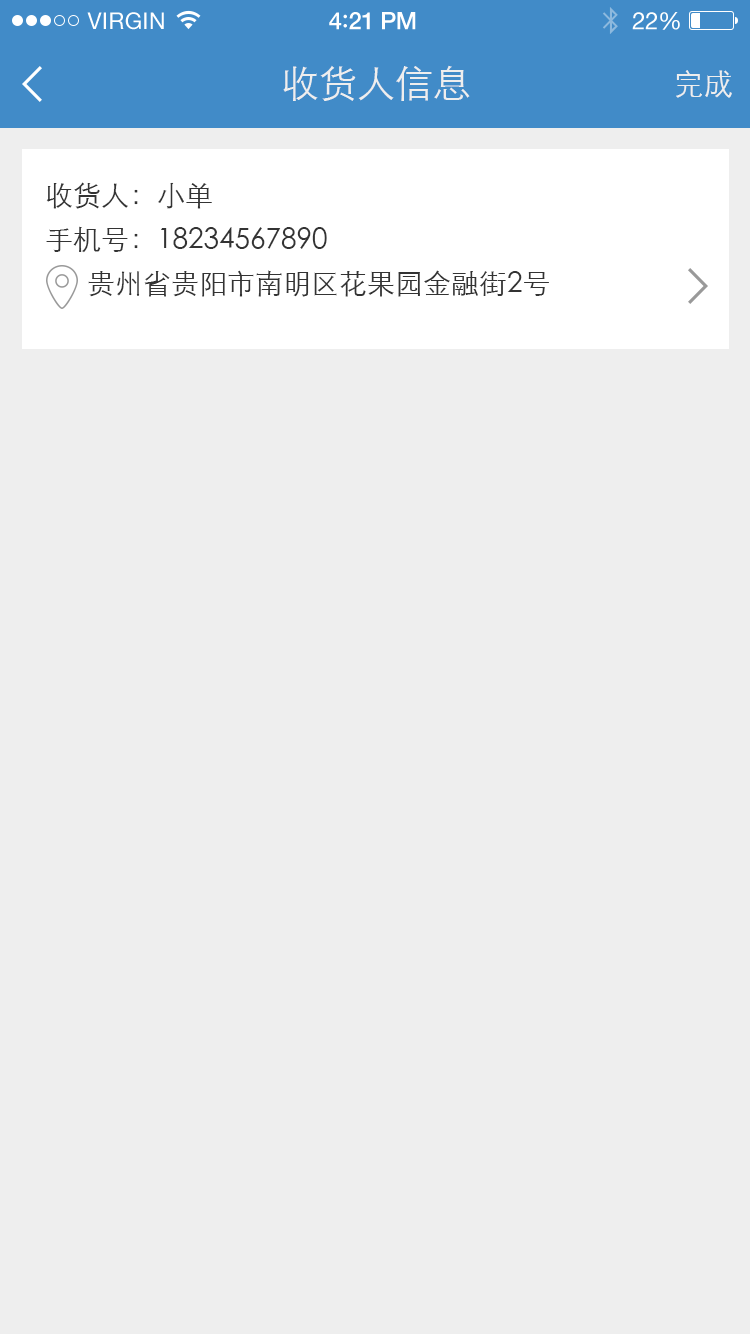
<style>
.page{position:relative;width:750px;height:1334px;background:#eeeeee}
.page>*{position:absolute;margin:0}
.t1{font:23px "HelveticaNeue";letter-spacing:0.02em;color:#ffffff}
.t2{font:24px "HelveticaNeue-Medium";letter-spacing:-0.02em;color:#ffffff}
.t3{font:26px "Avenir-Medium";letter-spacing:-0.02em;color:#ffffff}
.t4{font:24px "HelveticaNeue";letter-spacing:-0.02em;color:#ffffff}
.t5{font:38px "STXihei";color:#eeeeee}
.t6{font:30px "STXihei";color:#eeeeee}
.t7{font:28px/44px "STXihei";color:#333333}
</style>
<div class="page">
<p class="t1" style="left:87px;top:12px;width:77px;height:18px">VIRGIN</p>
<p class="t2" style="left:329px;top:12px;width:87px;height:18px">4<span class="t3">:</span>21 PM</p>
<p class="t4" style="left:632px;top:12px;width:48px;height:18px">22%</p>
<p class="t5" style="left:283px;top:65px;width:187px;height:36px">收货人信息</p>
<p class="t6" style="left:676px;top:70px;width:56px;height:28px">完成</p>
<p class="t7" style="left:46px;top:182px;width:503px;height:115px">收货人：小单<br>手机号：18234567890<br>      贵州省贵阳市南明区花果园金融街2号</p>
</div>
